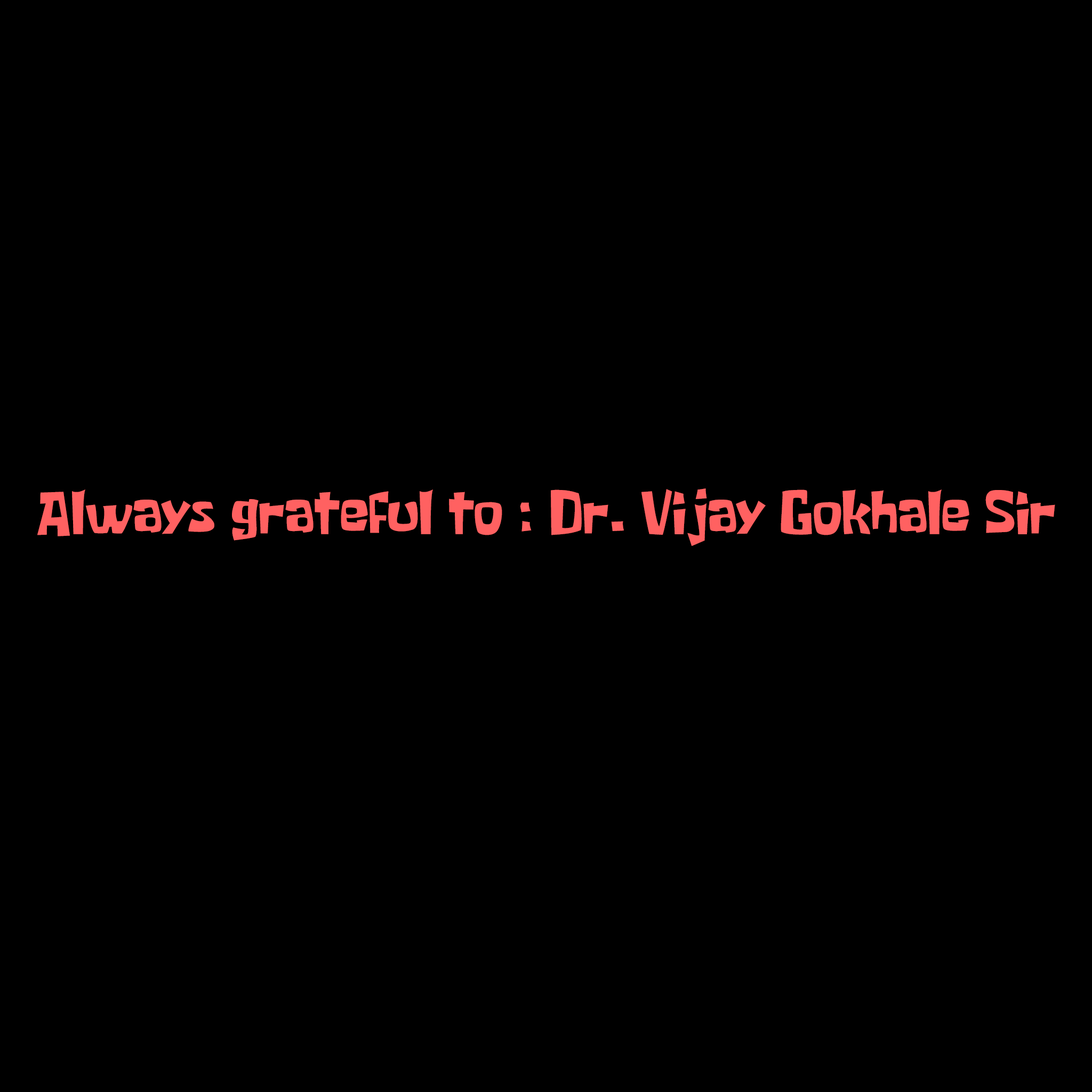
<style>
.page{position:relative;width:1092px;height:1092px;background:#000000}
.page>*{position:absolute;margin:0}
.t1{font:49.2px "SpongeboyMeBob";color:#ff6161}
</style>
<div class="page">
<p class="t1" style="left:37px;top:488px;width:1018px;height:58px">Always grateful to : Dr. Vijay Gokhale Sir</p>
</div>
